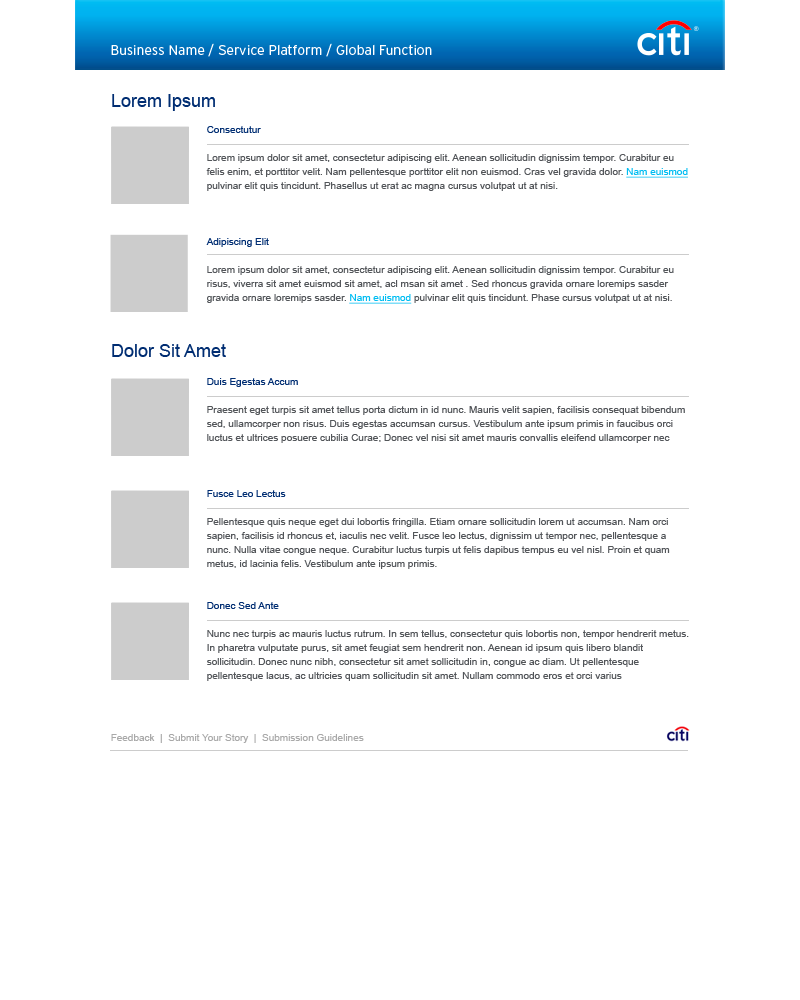
<style>
.page{position:relative;width:800px;height:1000px;background:#ffffff}
.page>*{position:absolute;margin:0}
.t1{font:14px "Interstate-Light";color:#ffffff}
.t2{font:18px "ArialMT";color:#002d72}
.t3{font:10px/14px "ArialMT";color:#53565a}
.t4{font:10px/14px "ArialMT";color:#002d72}
.t5{font:10px/14px "ArialMT";color:#00bdf2;text-decoration:underline}
.t6{font:10px "ArialMT";color:#a9a9a9}
</style>
<div class="page">
<p class="t1" style="left:111px;top:43px;width:321px;height:14px">Business Name / Service Platform / Global Function</p>
<p class="t2" style="left:112px;top:94px;width:103px;height:17px">Lorem Ipsum</p>
<p class="t3" style="left:206px;top:126px;width:482px;height:178px"><span class="t4">Consectutur<br></span><br>Lorem ipsum dolor sit amet, consectetur adipiscing elit. Aenean sollicitudin dignissim tempor. Curabitur eu felis enim, et porttitor velit. Nam pellentesque porttitor elit non euismod. Cras vel gravida dolor. <span class="t5">Nam euismod</span> pulvinar elit quis tincidunt. Phasellus ut erat ac magna cursus volutpat ut at nisi.<br><br><span class="t4"><br><br>Adipiscing Elit<br></span><br>Lorem ipsum dolor sit amet, consectetur adipiscing elit. Aenean sollicitudin dignissim tempor. Curabitur eu risus, viverra sit amet euismod sit amet, acl msan sit amet . Sed rhoncus gravida ornare loremips sasder gravida ornare loremips sasder. <span class="t5">Nam euismod</span> pulvinar elit quis tincidunt. Phase cursus volutpat ut at nisi.</p>
<p class="t2" style="left:112px;top:344px;width:114px;height:13px">Dolor Sit Amet</p>
<p class="t3" style="left:207px;top:378px;width:482px;height:303px"><span class="t4">Duis Egestas Accum<br></span><br>Praesent eget turpis sit amet tellus porta dictum in id nunc. Mauris velit sapien, facilisis consequat bibendum sed, ullamcorper non risus. Duis egestas accumsan cursus. Vestibulum ante ipsum primis in faucibus orci luctus et ultrices posuere cubilia Curae; Donec vel nisi sit amet mauris convallis eleifend ullamcorper nec <br><br><span class="t4"><br><br>Fusce Leo Lectus<br></span><br>Pellentesque quis neque eget dui lobortis fringilla. Etiam ornare sollicitudin lorem ut accumsan. Nam orci sapien, facilisis id rhoncus et, iaculis nec velit. Fusce leo lectus, dignissim ut tempor nec, pellentesque a nunc. Nulla vitae congue neque. Curabitur luctus turpis ut felis dapibus tempus eu vel nisl. Proin et quam metus, id lacinia felis. Vestibulum ante ipsum primis.<br><br><span class="t4"><br>Donec Sed Ante<br></span><br>Nunc nec turpis ac mauris luctus rutrum. In sem tellus, consectetur quis lobortis non, tempor hendrerit metus. In pharetra vulputate purus, sit amet feugiat sem hendrerit non. Aenean id ipsum quis libero blandit sollicitudin. Donec nunc nibh, consectetur sit amet sollicitudin in, congue ac diam. Ut pellentesque pellentesque lacus, ac ultricies quam sollicitudin sit amet. Nullam commodo eros et orci varius</p>
<p class="t6" style="left:111px;top:734px;width:253px;height:9px">Feedback  |  Submit Your Story  |  Submission Guidelines</p>
</div>
